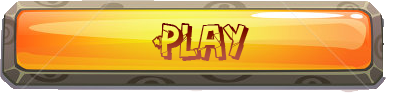
<style>
.page{position:relative;width:393px;height:93px}
.page>*{position:absolute;margin:0}
.t1{font:50px "PeintureFraiche"}
</style>
<div class="page">
<p class="t1" style="left:152px;top:23px;width:97px;height:38px">Play</p>
</div>
